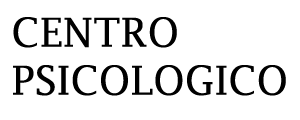
<style>
.page{position:relative;width:300px;height:120px;background:#ffffff}
.page>*{position:absolute;margin:0}
.t1{font:40px "LucidaFax";color:#000000}
</style>
<div class="page">
<p class="t1" style="left:13px;top:17px;width:273px;height:79px">CENTRO <br>PSICOLOGICO</p>
</div>
